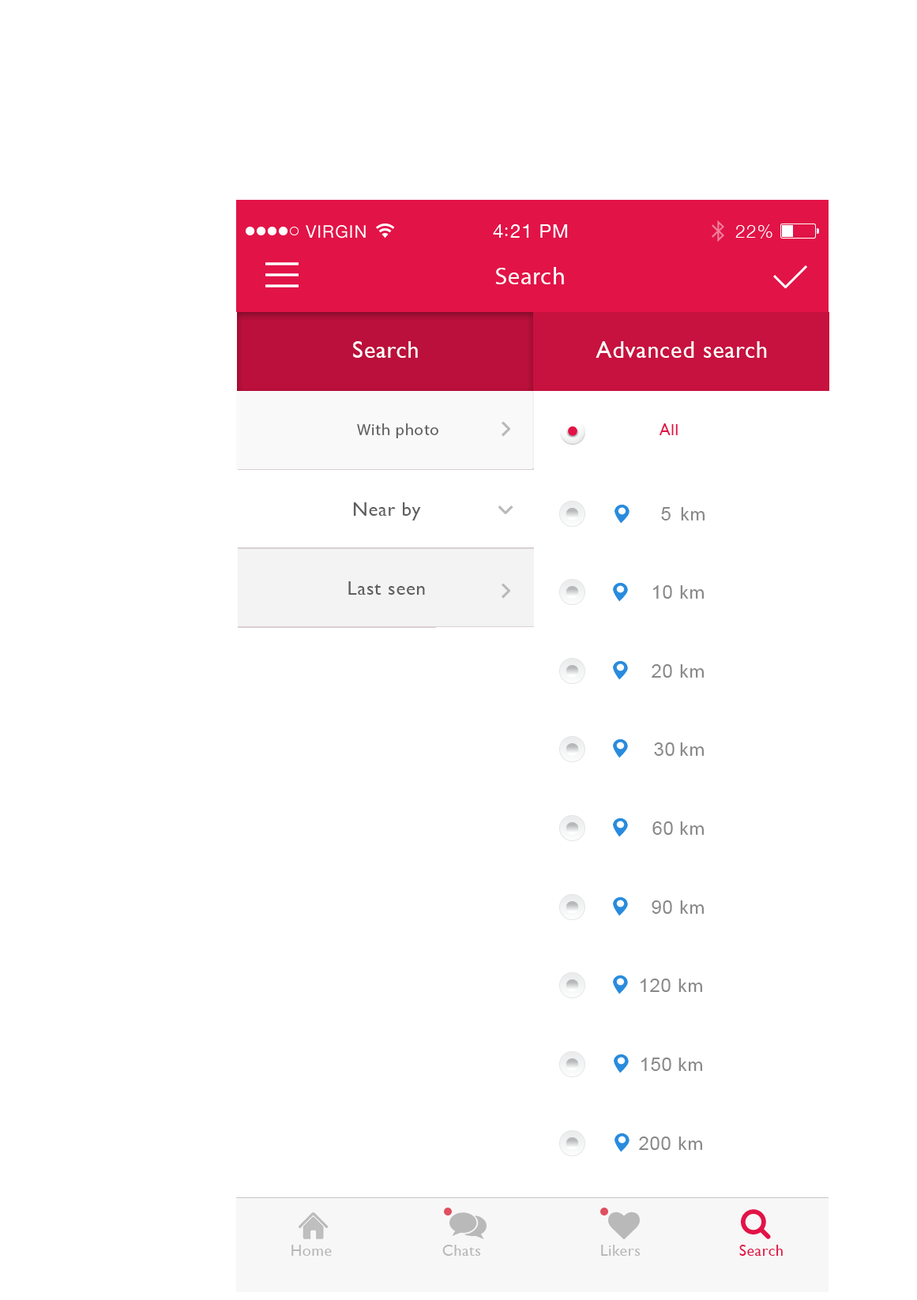
<style>
.page{position:relative;width:917px;height:1300px;background:#ffffff}
.page>*{position:absolute;margin:0}
.t1{font:23.7px "MyriadPro-Regular";letter-spacing:0.029em;color:#ffffff}
.t2{font:23.7px "GillSans";letter-spacing:0.029em;color:#ffffff}
.t3{font:16.5px "MyriadPro-Regular";letter-spacing:0.029em;color:#5f5f5f}
.t4{font:16.5px "GillSans";letter-spacing:0.029em;color:#e21347}
.t5{font:19.7px "GillSans";letter-spacing:0.029em;color:#5f5f5f}
.t6{font:19px "ArialMT";letter-spacing:0.029em;color:#898989}
.t7{font:19px "MyriadPro-Regular";letter-spacing:0.029em;color:#898989}
.t8{font:15.8px "GillSans";letter-spacing:0.029em;color:#b9b9b9}
.t9{font:15.8px "GillSans";letter-spacing:0.029em;color:#e21347}
</style>
<div class="page">
<p class="t1" style="left:495px;top:267px;width:69px;height:17px">Search</p>
<p class="t2" style="left:353px;top:341px;width:65px;height:17px">Search</p>
<p class="t2" style="left:596px;top:341px;width:171px;height:17px">Advanced search</p>
<p class="t3" style="left:357px;top:423px;width:81px;height:15px">With photo</p>
<p class="t4" style="left:659px;top:423px;width:19px;height:12px">All</p>
<p class="t5" style="left:353px;top:502px;width:68px;height:19px">Near by</p>
<p class="t6" style="left:661px;top:507px;width:10px;height:14px">5</p>
<p class="t7" style="left:681px;top:507px;width:24px;height:14px">km</p>
<p class="t5" style="left:348px;top:581px;width:77px;height:14px">Last seen</p>
<p class="t6" style="left:653px;top:585px;width:19px;height:14px">10</p>
<p class="t7" style="left:680px;top:585px;width:24px;height:14px">km</p>
<p class="t6" style="left:652px;top:664px;width:20px;height:14px">20</p>
<p class="t7" style="left:680px;top:664px;width:24px;height:14px">km</p>
<p class="t6" style="left:654px;top:743px;width:21px;height:13px">30</p>
<p class="t7" style="left:680px;top:743px;width:24px;height:13px">km</p>
<p class="t6" style="left:652px;top:822px;width:21px;height:13px">60</p>
<p class="t7" style="left:680px;top:822px;width:24px;height:13px">km</p>
<p class="t6" style="left:652px;top:901px;width:20px;height:13px">90</p>
<p class="t7" style="left:680px;top:901px;width:24px;height:13px">km</p>
<p class="t6" style="left:641px;top:979px;width:30px;height:13px">120</p>
<p class="t7" style="left:679px;top:979px;width:23px;height:13px">km</p>
<p class="t6" style="left:641px;top:1058px;width:30px;height:13px">150</p>
<p class="t7" style="left:679px;top:1058px;width:23px;height:13px">km</p>
<p class="t6" style="left:639px;top:1137px;width:32px;height:13px">200</p>
<p class="t7" style="left:679px;top:1137px;width:23px;height:13px">km</p>
<p class="t8" style="left:291px;top:1245px;width:41px;height:11px">Home</p>
<p class="t8" style="left:442px;top:1245px;width:39px;height:11px">Chats</p>
<p class="t8" style="left:601px;top:1245px;width:40px;height:11px">Likers</p>
<p class="t9" style="left:739px;top:1245px;width:44px;height:11px">Search</p>
</div>
